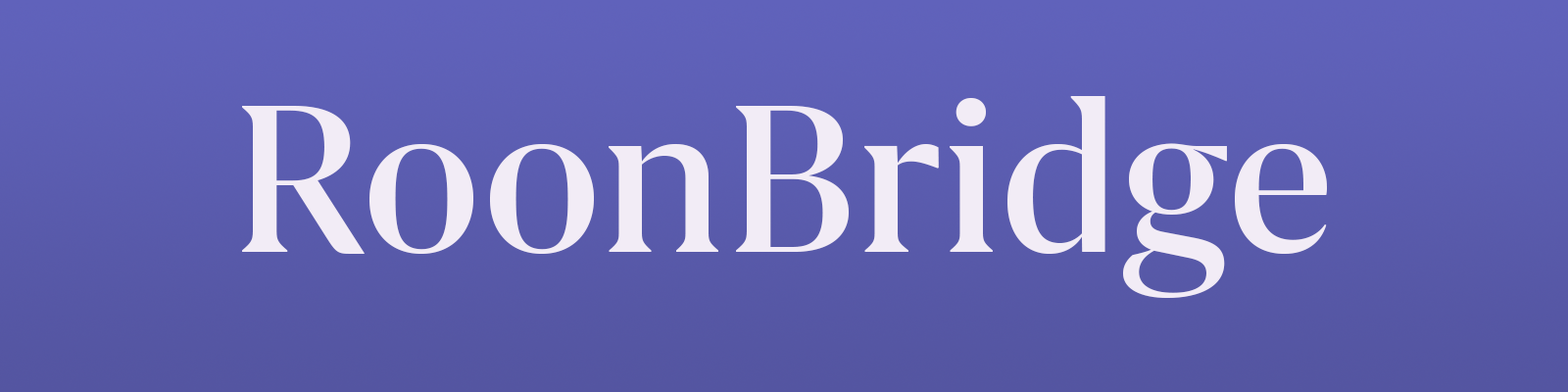
<style>
.page{position:relative;width:1568px;height:392px}
.page>*{position:absolute;margin:0}
.t1{font:243.7px "GrifoM-Medium";color:#f2ecf6}
</style>
<div class="page">
<p class="t1" style="left:242px;top:96px;width:1085px;height:202px">RoonBridge</p>
</div>
